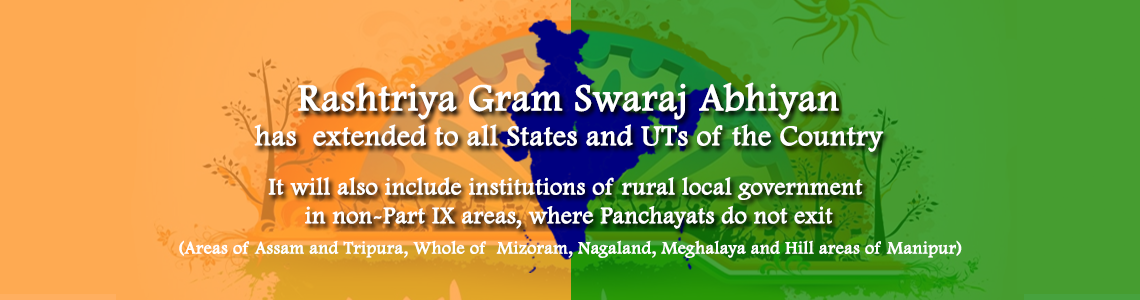
<style>
.page{position:relative;width:1140px;height:300px}
.page>*{position:absolute;margin:0}
.t1{font:24px "FootlightMTLight";color:#ffffff;font-weight:bold}
.t2{font:39px "FootlightMTLight";color:#ffffff;font-weight:bold}
.t3{font:29px "FootlightMTLight";color:#ffffff;font-weight:bold}
.t4{font:18px "FootlightMTLight";color:#ffffff;font-weight:bold}
</style>
<div class="page">
<p class="t1" style="left:254px;top:82px;width:630px;height:147px;text-align:center"><span class="t2">Rashtriya Gram Swaraj Abhiyan<br></span><span class="t3">has  extended to all States and UTs of the Country<br><br></span>It will also include institutions of rural local government <br>in non-Part IX areas, where Panchayats do not exit</p>
<p class="t4" style="left:179px;top:240px;width:783px;height:18px">(Areas of Assam and Tripura, Whole of  Mizoram, Nagaland, Meghalaya and Hill areas of Manipur)</p>
</div>
